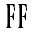
<style>
.page{position:relative;width:32px;height:32px;background:#ffffff}
.page>*{position:absolute;margin:0}
.t1{font:29px "Ferrum";color:#000000}
</style>
<div class="page">
<p class="t1" style="left:6px;top:4px;width:21px;height:24px">FF</p>
</div>
